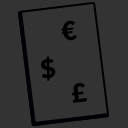
<style>
.page{position:relative;width:128px;height:128px;background:#333333}
.page>*{position:absolute;margin:0}
.t1{font:25.8px "Lato-Black";color:#000000}
</style>
<div class="page">
<p class="t1" style="left:61px;top:20px;width:16px;height:21px;rotate:-7deg">€</p>
<p class="t1" style="left:41px;top:56px;width:15px;height:25px;rotate:-7deg">$</p>
<p class="t1" style="left:71px;top:82px;width:16px;height:21px;rotate:-7deg">£</p>
</div>
